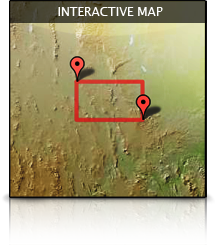
<style>
.page{position:relative;width:216px;height:245px}
.page>*{position:absolute;margin:0}
.t1{font:12px "LucidaGrande";color:#ffffff;text-transform:uppercase}
</style>
<div class="page">
<p class="t1" style="left:58px;top:7px;width:105px;height:9px">interactive Map</p>
</div>
